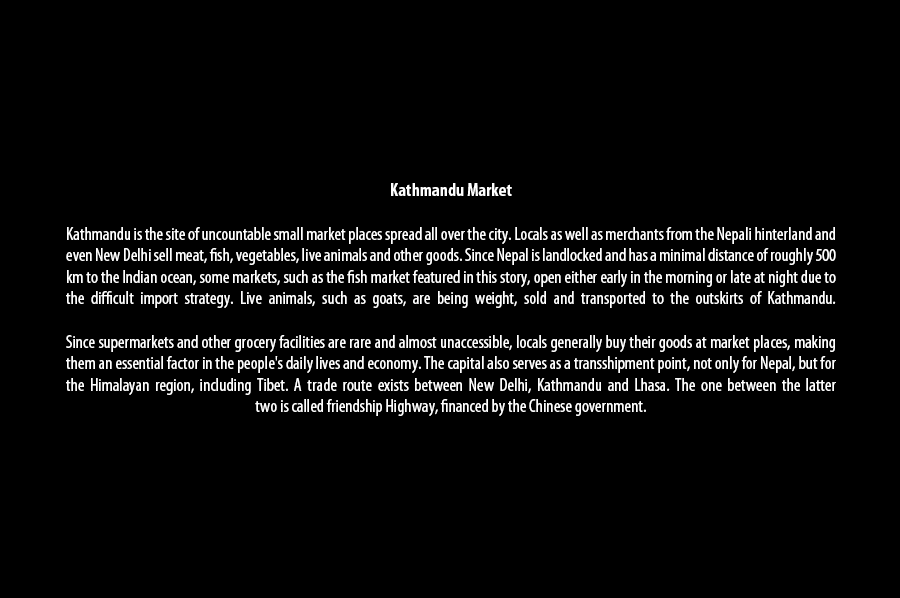
<style>
.page{position:relative;width:900px;height:598px;background:#000000}
.page>*{position:absolute;margin:0}
.t1{font:18px "MyriadPro-Cond";color:#ffffff}
.t2{font:18px "MyriadPro-BoldCond";color:#ffffff}
</style>
<div class="page">
<p class="t1" style="left:66px;top:183px;width:770px;height:233px;text-align:center"><span class="t2">Kathmandu Market<br></span><br>Kathmandu is the site of uncountable small market places spread all over the city. Locals as well as merchants from the Nepali hinterland and even New Delhi sell meat, fish, vegetables, live animals and other goods. Since Nepal is landlocked and has a minimal distance of roughly 500 km to the Indian ocean, some markets, such as the fish market featured in this story, open either early in the morning or late at night due to the difficult import strategy. Live animals, such as goats, are being weight, sold and transported to the outskirts of Kathmandu.<br><br>Since supermarkets and other grocery facilities are rare and almost unaccessible, locals generally buy their goods at market places, making them an essential factor in the people's daily lives and economy. The capital also serves as a transshipment point, not only for Nepal, but for the Himalayan region, including Tibet. A trade route exists between New Delhi, Kathmandu and Lhasa. The one between the latter <br>two is called friendship Highway, financed by the Chinese government.</p>
</div>
